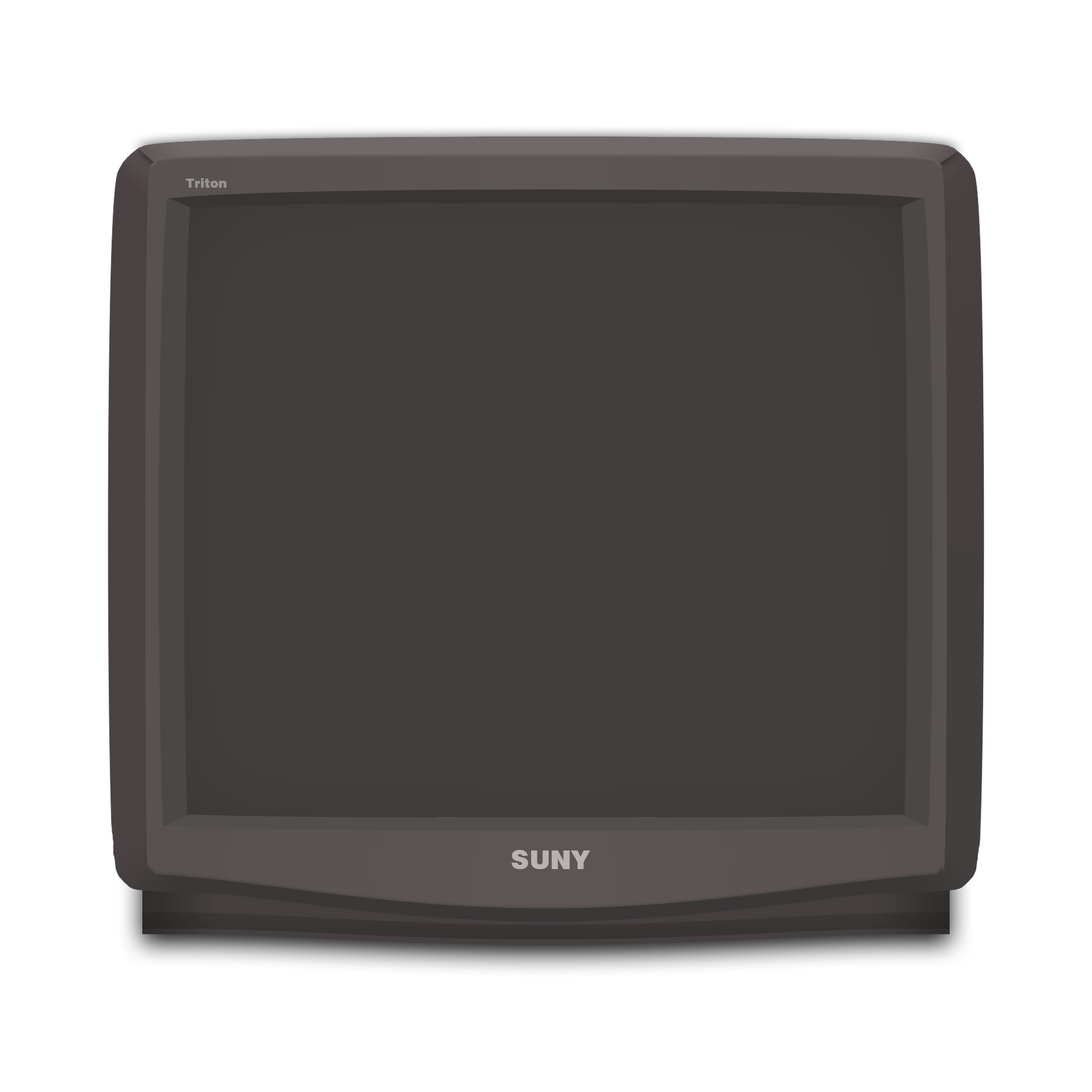
<style>
.page{position:relative;width:1092px;height:1092px;background:#ffffff}
.page>*{position:absolute;margin:0}
.t1{font:12.8px "Swiss721BT-Black";color:#969292}
.t2{font:25.6px "Swiss721BT-Black";color:#bbb1b1}
</style>
<div class="page">
<p class="t1" style="left:186px;top:178px;width:41px;height:10px">Triton</p>
<p class="t2" style="left:511px;top:850px;width:79px;height:19px">SUNY</p>
</div>
